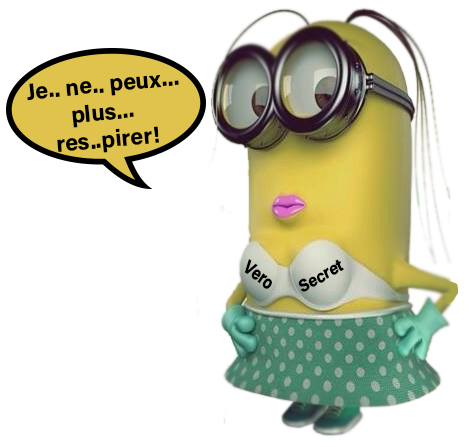
<style>
.page{position:relative;width:469px;height:447px;background:#ffffff}
.page>*{position:absolute;margin:0}
.t1{font:23px "AcuminConcept-Bold";color:#000000}
.t2{font:18.7px "AcuminConcept-Bold";color:#000000;scale:0.83 1}
.t3{font:17.2px "AcuminConcept-Bold";color:#000000;scale:0.93 1}
</style>
<div class="page">
<p class="t1" style="left:27px;top:75px;width:152px;height:78px;text-align:center;rotate:-6deg">Je.. ne.. peux...<br>plus... <br>res..pirer!</p>
<p class="t2" style="left:244px;top:259px;width:28px;height:30px;rotate:36deg">Vero</p>
<p class="t3" style="left:298px;top:259px;width:46px;height:33px;rotate:-30deg">Secret</p>
</div>
